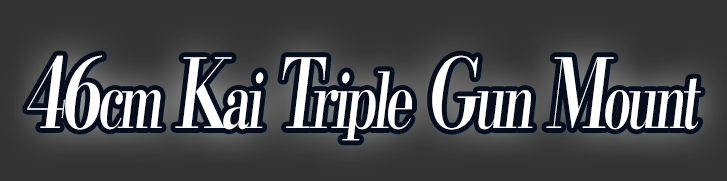
<style>
.page{position:relative;width:727px;height:181px;background:#333333}
.page>*{position:absolute;margin:0}
.t1{font:76.8px "KochoStd-Heavy";letter-spacing:-0.08em;color:#ffffff;font-style:italic;scale:0.68 1}
.t2{font:96px "KochoStd-Heavy";letter-spacing:-0.08em;color:#ffffff;font-style:italic;scale:0.68 1}
</style>
<div class="page">
<p class="t1" style="left:27px;top:55px;width:674px;height:86px"><span class="t2">46</span>cm<span class="t2"> K</span>ai<span class="t2"> T</span>riple<span class="t2"> G</span>un<span class="t2"> M</span>ount</p>
</div>
